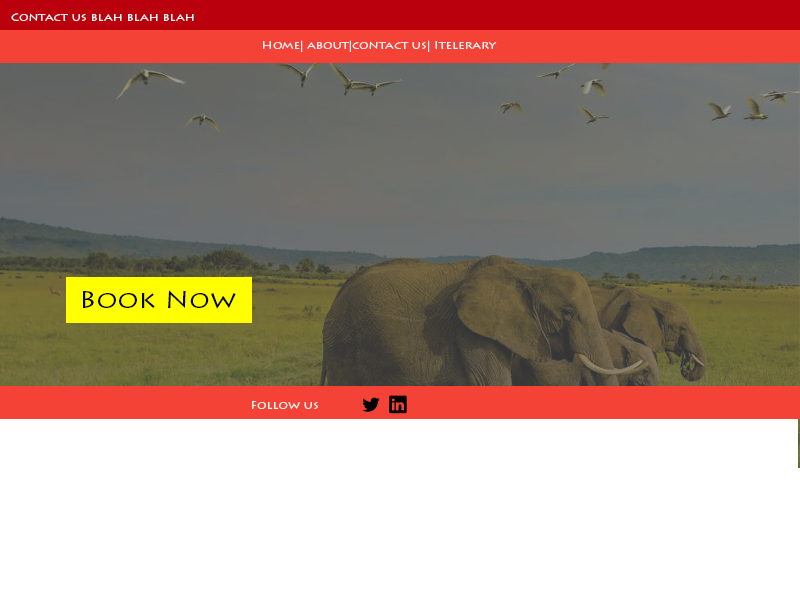
<style>
.page{position:relative;width:800px;height:600px;background:#ffffff}
.page>*{position:absolute;margin:0}
.t1{font:11px "LithosPro-Regular";color:#fffcfc;scale:1.13 1}
.t2{font:11px "LithosPro-Regular";color:#fcfbfb;scale:1.13 1}
.t3{font:24px "LithosPro-Regular";color:#020202;scale:1.13 1}
</style>
<div class="page">
<p class="t1" style="left:11px;top:13px;width:183px;height:8px">Contact us blah blah blah</p>
<p class="t2" style="left:263px;top:40px;width:234px;height:12px">Home| about|contact us| Itelerary</p>
<p class="t3" style="left:83px;top:290px;width:153px;height:19px">Book Now</p>
<p class="t1" style="left:252px;top:401px;width:66px;height:9px">Follow us</p>
</div>
